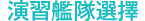
<style>
.page{position:relative;width:145px;height:21px;background:#ffffff}
.page>*{position:absolute;margin:0}
.t1{font:22px "GothicMB101Pr6N-Medium";color:#1dbcbf}
</style>
<div class="page">
<p class="t1" style="left:7px;top:0px;width:132px;height:21px">演習艦隊選擇</p>
</div>
